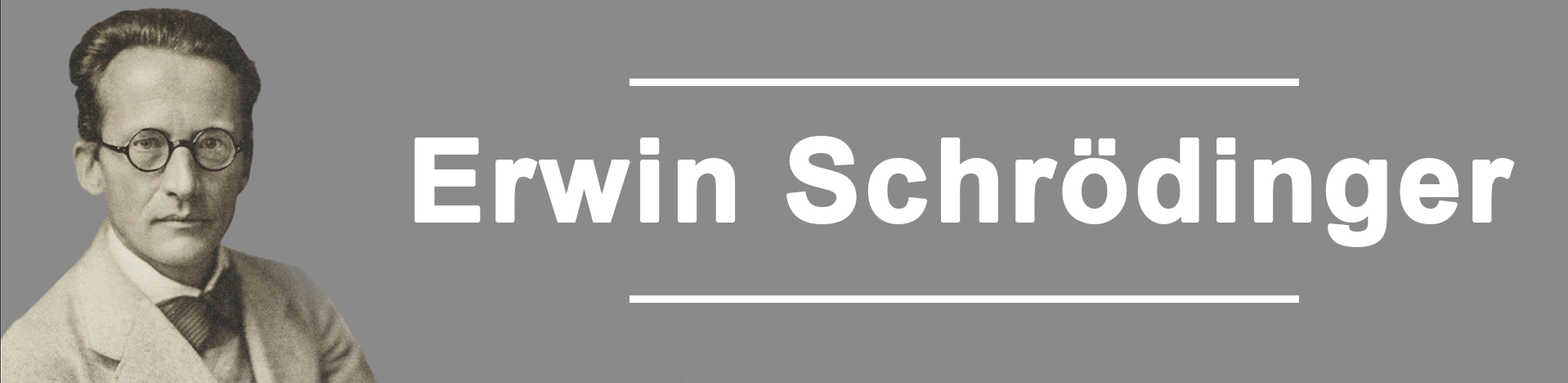
<style>
.page{position:relative;width:1568px;height:383px;background:#8a8a8a}
.page>*{position:absolute;margin:0}
.t1{font:114.5px "Arial-BoldMT";letter-spacing:0.02em;color:#ffffff;font-weight:bold}
</style>
<div class="page">
<p class="t1" style="left:414px;top:136px;width:1101px;height:111px">Erwin Schrödinger</p>
</div>
